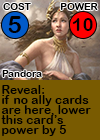
<style>
.page{position:relative;width:100px;height:140px;background:#795b01}
.page>*{position:absolute;margin:0}
.t1{font:9.7px "ArialRoundedMTBold";letter-spacing:0.01em;color:#000000}
.t2{font:24px "ArialRoundedMTBold";letter-spacing:0.01em;color:#000000}
.t3{font:18px "ArialRoundedMTBold";letter-spacing:0.01em;color:#000000}
.t4{font:12px/10px "ArialRoundedMTBold";letter-spacing:0.01em;color:#000000}
</style>
<div class="page">
<p class="t1" style="left:3px;top:3px;width:28px;height:7px">COST</p>
<p class="t1" style="left:60px;top:3px;width:38px;height:7px">POWER</p>
<p class="t2" style="left:8px;top:16px;width:13px;height:17px">5</p>
<p class="t3" style="left:72px;top:18px;width:21px;height:13px">10</p>
<p class="t1" style="left:2px;top:70px;width:40px;height:7px">Pandora</p>
<p class="t4" style="left:1px;top:85px;width:90px;height:51px">Reveal:<br>if no ally cards<br>are here, lower<br>this card’s <br>power by 5</p>
</div>
